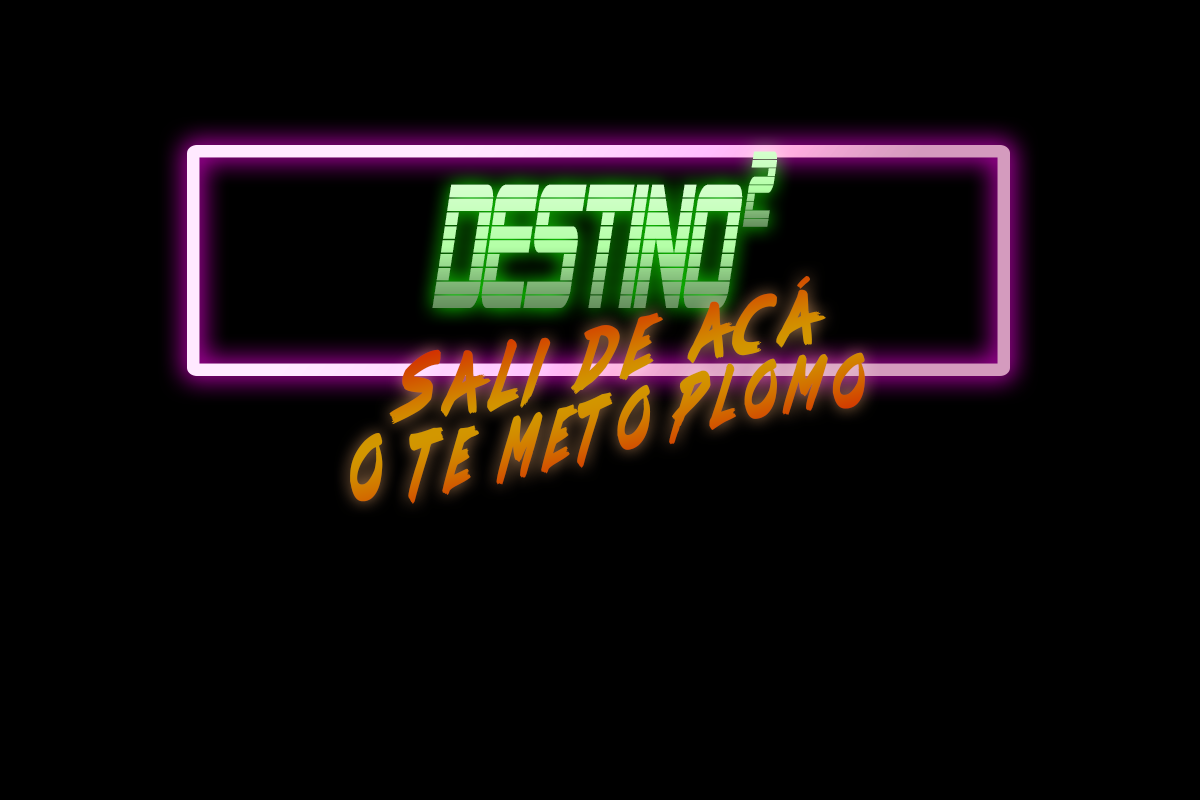
<style>
.page{position:relative;width:1200px;height:800px;background:#000000}
.page>*{position:absolute;margin:0}
.t1{font:105.6px "AlienEncountersBoldItalic";scale:0.41 1}
.t2{font:173.1px "AlienEncountersBoldItalic";scale:0.42 1}
.t3{font:75.6px/1px "lazer84";letter-spacing:0.22em;scale:0.55 1}
.t4{font:75.6px/1px "lazer84";letter-spacing:0.22em;scale:0.65 1}
</style>
<div class="page">
<p class="t1" style="left:742px;top:151px;width:35px;height:76px">2</p>
<p class="t2" style="left:432px;top:184px;width:311px;height:124px">destino</p>
<p class="t3" style="left:350px;top:275px;width:515px;height:229px;text-align:center;rotate:3deg"><span class="t4"><br><br>sali de acá<br></span>o te meto plomo</p>
</div>
